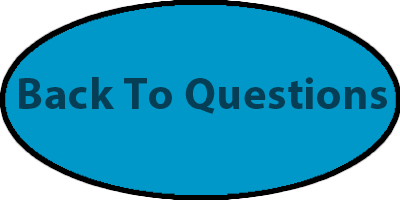
<style>
.page{position:relative;width:400px;height:200px;background:#0098c8}
.page>*{position:absolute;margin:0}
.t1{font:44.8px "MyriadPro-Bold";letter-spacing:0.01em;color:#063f55}
</style>
<div class="page">
<p class="t1" style="left:19px;top:77px;width:368px;height:37px">Back To Questions</p>
</div>
